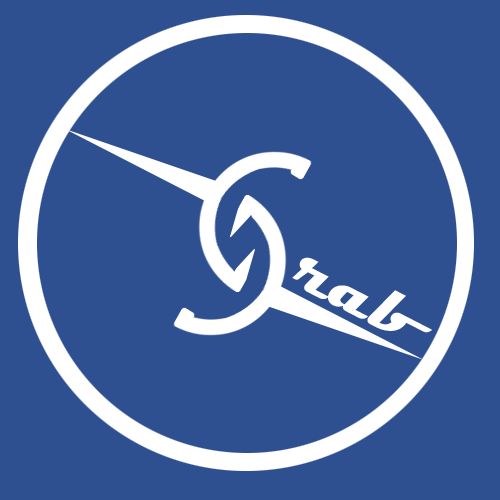
<style>
.page{position:relative;width:500px;height:500px;background:#2e5090}
.page>*{position:absolute;margin:0}
.t1{font:70.4px "Magneto-Bold";color:#ffffff}
</style>
<div class="page">
<p class="t1" style="left:292px;top:257px;width:140px;height:76px;rotate:27deg">rab</p>
</div>
